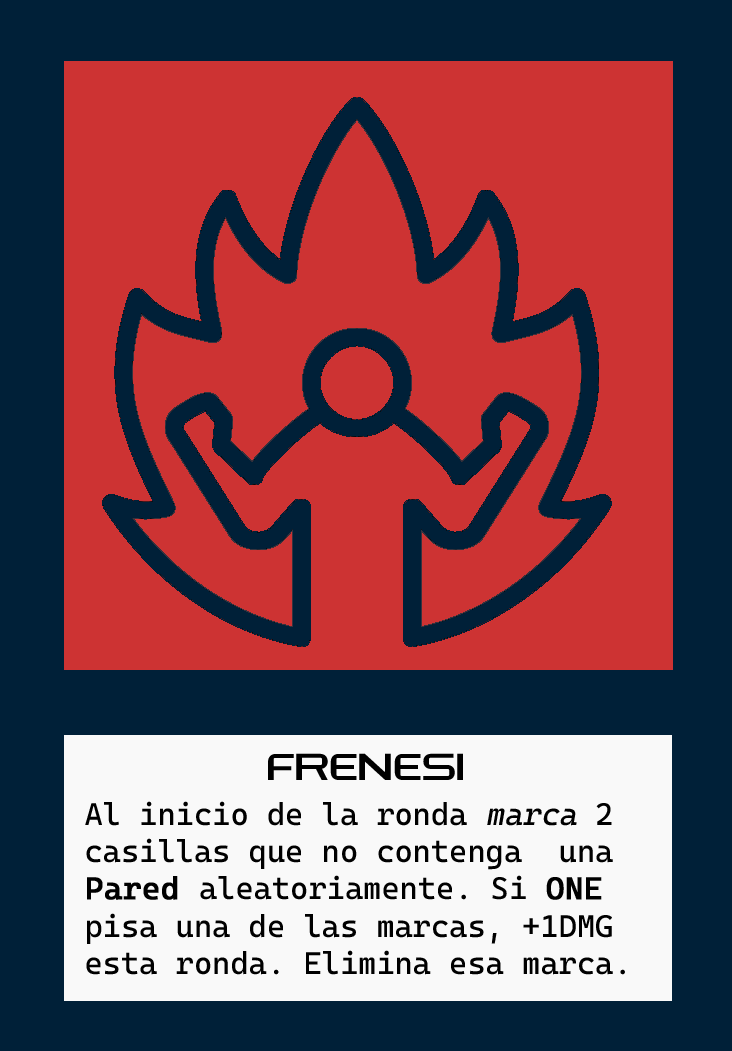
<style>
.page{position:relative;width:732px;height:1051px;background:#cd3333}
.page>*{position:absolute;margin:0}
.t1{font:37.4px "AstroheadFREERegular";color:#000000}
.t2{font:31.1px "CascadiaMono-Regular";color:#000000}
.t3{font:31.1px "CascadiaMono-Regular";color:#000000;font-style:italic}
.t4{font:31.1px "CascadiaMono-Regular";color:#000000;font-weight:bold}
</style>
<div class="page">
<p class="t1" style="left:268px;top:753px;width:195px;height:27px">FRENESI</p>
<p class="t2" style="left:85px;top:801px;width:540px;height:174px">Al inicio de la ronda <span class="t3">marca </span>2 casillas que no contenga  una  <span class="t4">Pared </span>aleatoriamente. Si <span class="t4">ONE</span> pisa una de las marcas, +1DMG esta ronda. Elimina esa marca.</p>
</div>
